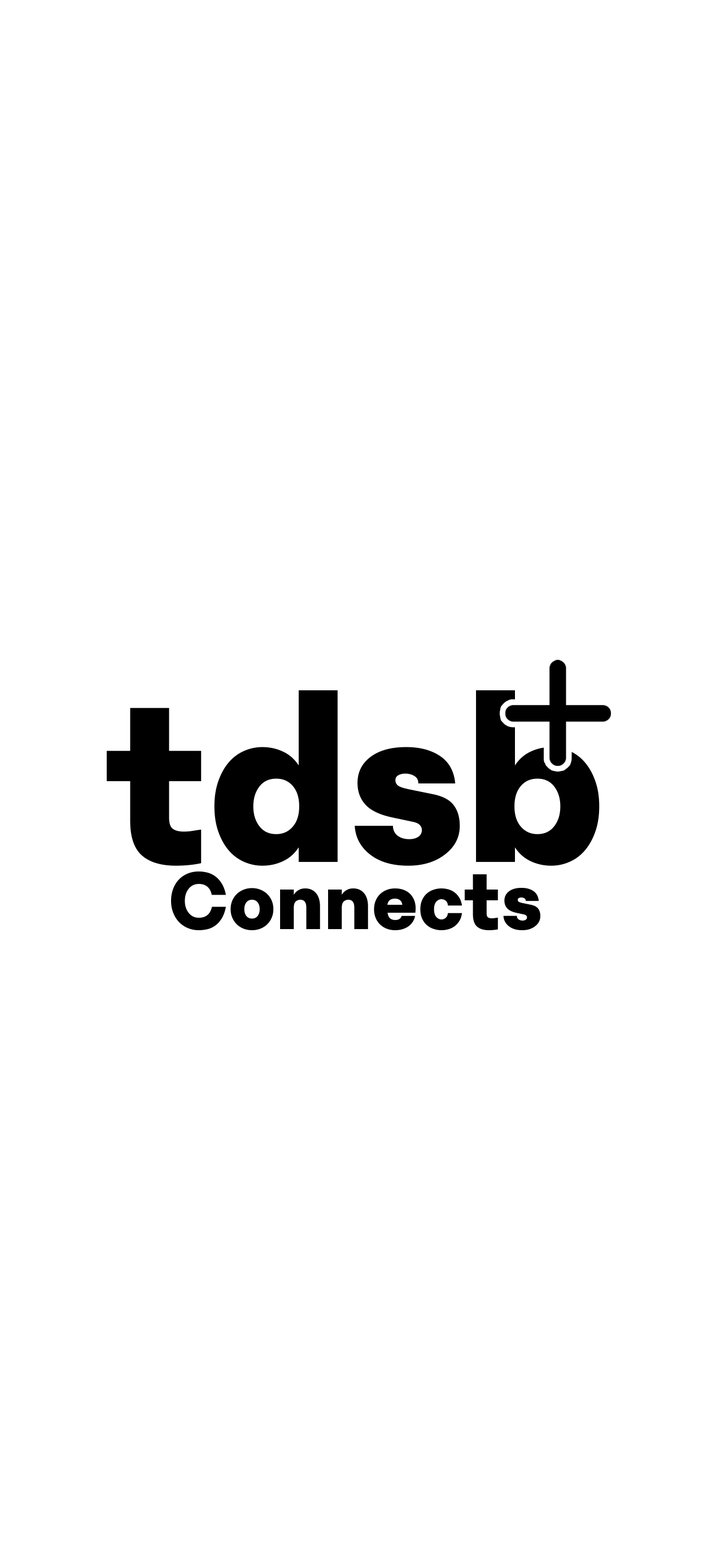
<style>
.page{position:relative;width:725px;height:1568px;background:#ffffff}
.page>*{position:absolute;margin:0}
.t1{font:252.3px "TRIALPhantomSans0.8-Bold";color:#000000}
.t2{font:88.6px "TRIALPhantomSans0.8-Bold";letter-spacing:0.01em;color:#000000}
</style>
<div class="page">
<p class="t1" style="left:107px;top:690px;width:492px;height:176px">tdsb</p>
<p class="t2" style="left:170px;top:871px;width:370px;height:59px">Connects</p>
</div>
